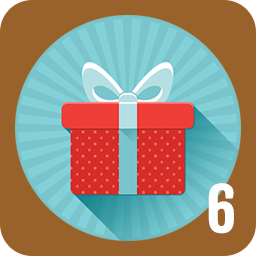
<style>
.page{position:relative;width:256px;height:256px;background:#99622b}
.page>*{position:absolute;margin:0}
.t1{font:56.9px "FjallaOne-Regular";letter-spacing:-0.03em;color:#ffffff;text-transform:uppercase;font-weight:bold}
</style>
<div class="page">
<p class="t1" style="left:208px;top:183px;width:26px;height:51px">6</p>
</div>
